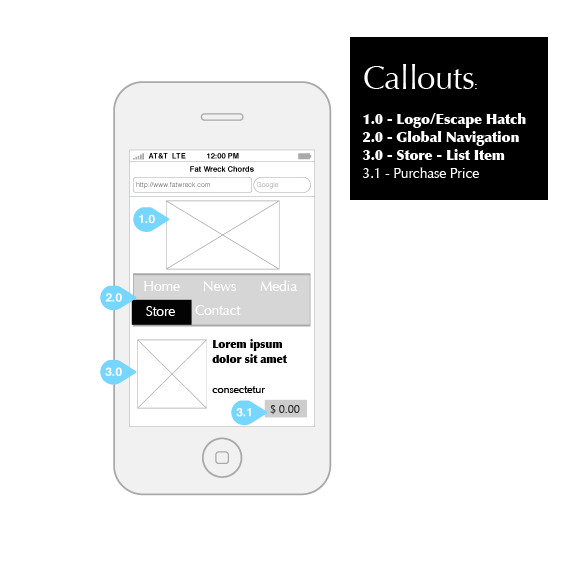
<style>
.page{position:relative;width:576px;height:576px;background:#ffffff}
.page>*{position:absolute;margin:0}
.t1{font:14px/18px "Optima-ExtraBlack";letter-spacing:-0.015em;color:#ffffff}
.t2{font:33px/17px "Optima-Regular";letter-spacing:-0.015em;color:#ffffff}
.t3{font:12px/17px "Optima-Regular";letter-spacing:-0.015em;color:#ffffff}
.t4{font:14px/18px "Optima-Regular";letter-spacing:-0.015em;color:#ffffff}
.t5{font:14px "Optima-Regular";letter-spacing:-0.015em;color:#ffffff}
.t6{font:11px/15px "Optima-ExtraBlack";letter-spacing:-0.015em;color:#000000}
.t7{font:11px/15px "Optima-Regular";letter-spacing:-0.015em;color:#000000}
.t8{font:11px "Optima-Regular";letter-spacing:-0.015em;color:#333333}
</style>
<div class="page">
<p class="t1" style="left:362px;top:64px;width:164px;height:114px"><span class="t2">Callouts</span><span class="t3">:<br><br></span>1.0 - Logo/Escape Hatch<br>2.0 - Global Navigation<br>3.0 - Store - List Item<br><span class="t4">3.1 - Purchase Price</span></p>
<p class="t5" style="left:144px;top:281px;width:36px;height:10px">Home</p>
<p class="t5" style="left:203px;top:281px;width:33px;height:10px">News</p>
<p class="t5" style="left:260px;top:280px;width:37px;height:11px">Media</p>
<p class="t5" style="left:195px;top:305px;width:46px;height:10px">Contact</p>
<p class="t5" style="left:146px;top:306px;width:29px;height:10px">Store</p>
<p class="t6" style="left:212px;top:339px;width:75px;height:54px">Lorem ipsum dolor sit amet<span class="t7"> <br><br>consectetur</span></p>
<p class="t8" style="left:270px;top:405px;width:30px;height:9px">$ 0.00</p>
</div>
